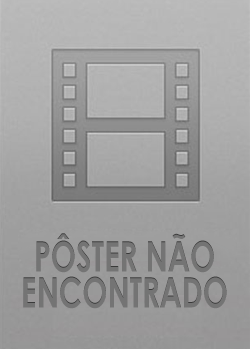
<style>
.page{position:relative;width:250px;height:349px}
.page>*{position:absolute;margin:0}
.t1{font:42px "CenturyGothic-Bold";color:#747474;scale:0.71 1}
</style>
<div class="page">
<p class="t1" style="left:23px;top:233px;width:204px;height:76px;text-align:center">PÔSTER NÃO<br>ENCONTRADO</p>
</div>
